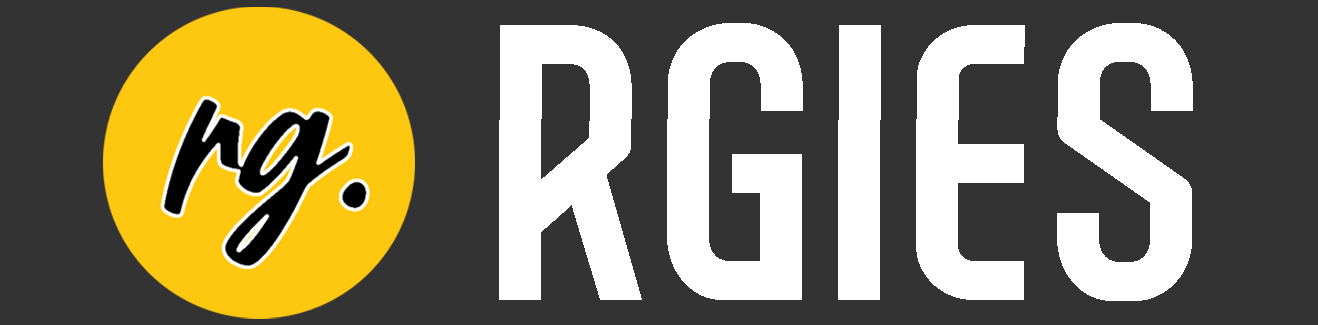
<style>
.page{position:relative;width:1318px;height:325px;background:#333333}
.page>*{position:absolute;margin:0}
.t1{font:324.1px "BROOKLINE-Condensed";color:#ffffff;scale:1.08 1}
</style>
<div class="page">
<p class="t1" style="left:499px;top:23px;width:694px;height:278px">RGIES</p>
</div>
